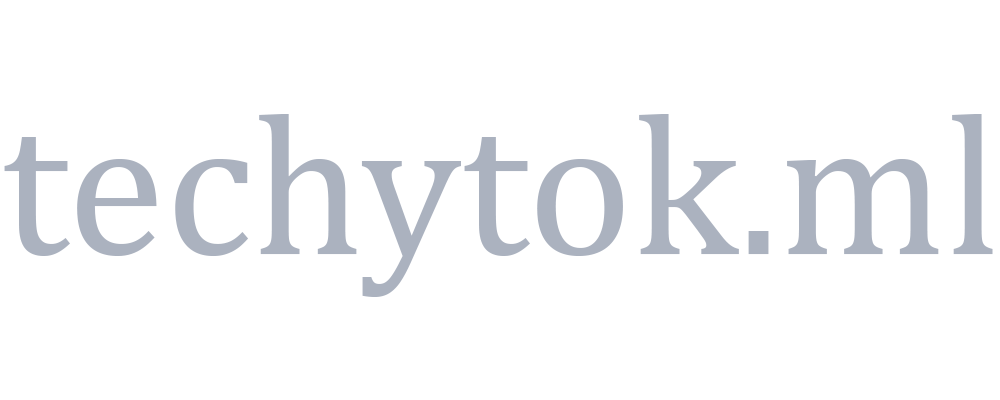
<style>
.page{position:relative;width:1000px;height:400px;background:#ffffff}
.page>*{position:absolute;margin:0}
.t1{font:200.3px "Cambria";color:#abb2bf}
</style>
<div class="page">
<p class="t1" style="left:4px;top:114px;width:989px;height:183px">techytok.ml</p>
</div>
